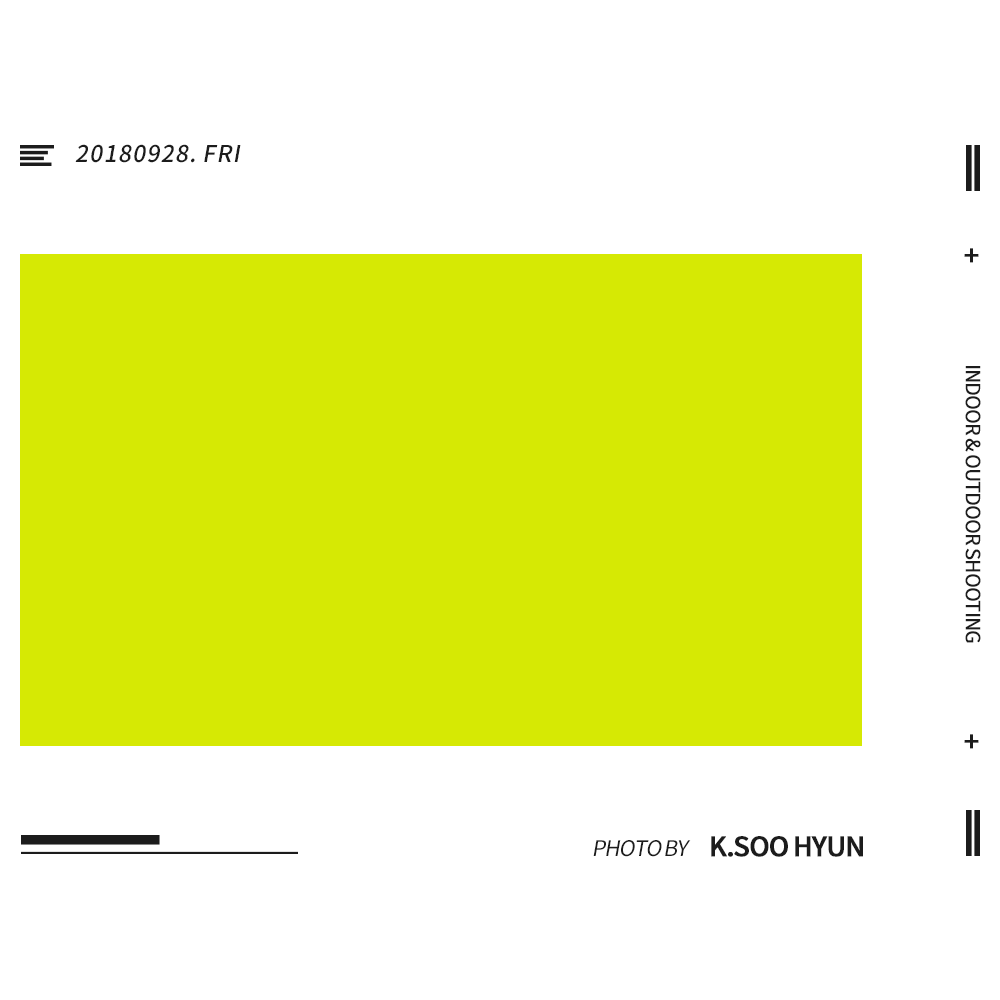
<style>
.page{position:relative;width:1000px;height:1000px;background:#ffffff}
.page>*{position:absolute;margin:0}
.t1{font:23px "SourceHanSansKR-Medium";letter-spacing:0.05em;color:#1c1c1c;font-style:italic}
.t2{font:26.9px "SourceHanSansKR-Medium";letter-spacing:-0.05em;color:#1c1c1c;font-weight:bold}
.t3{font:19.4px "SourceHanSansKR-Regular";letter-spacing:-0.05em;color:#1c1c1c;font-weight:bold}
.t4{font:21.5px "SourceHanSansKR-Regular";letter-spacing:-0.05em;color:#1c1c1c;font-style:italic}
</style>
<div class="page">
<p class="t1" style="left:75px;top:144px;width:166px;height:19px">20180928. FRI</p>
<p class="t2" style="left:964px;top:248px;width:15px;height:15px">+</p>
<p class="t3" style="left:965px;top:366px;width:16px;height:277px;rotate:90deg">INDOOR &amp; OUTDOOR SHOOTING</p>
<p class="t2" style="left:964px;top:734px;width:15px;height:15px">+</p>
<p class="t4" style="left:593px;top:840px;width:98px;height:17px">PHOTO BY</p>
<p class="t2" style="left:711px;top:836px;width:152px;height:21px">K.SOO HYUN</p>
</div>
